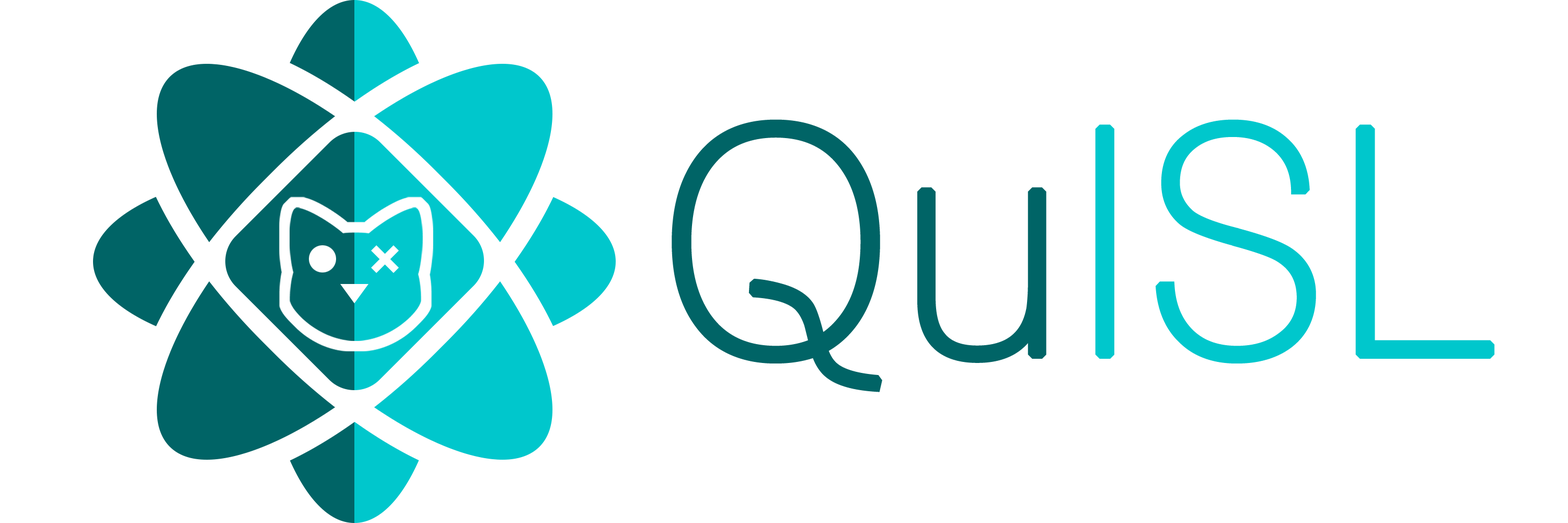
<style>
.page{position:relative;width:1568px;height:523px;background:#ffffff}
.page>*{position:absolute;margin:0}
.t1{font:313.6px "Lane-Narrow";color:#00c7cc;font-weight:bold}
.t2{font:313.6px "Lane-Narrow";color:#006466;font-weight:bold}
</style>
<div class="page">
<p class="t1" style="left:672px;top:119px;width:823px;height:273px"><span class="t2">Qu</span>ISL</p>
</div>
